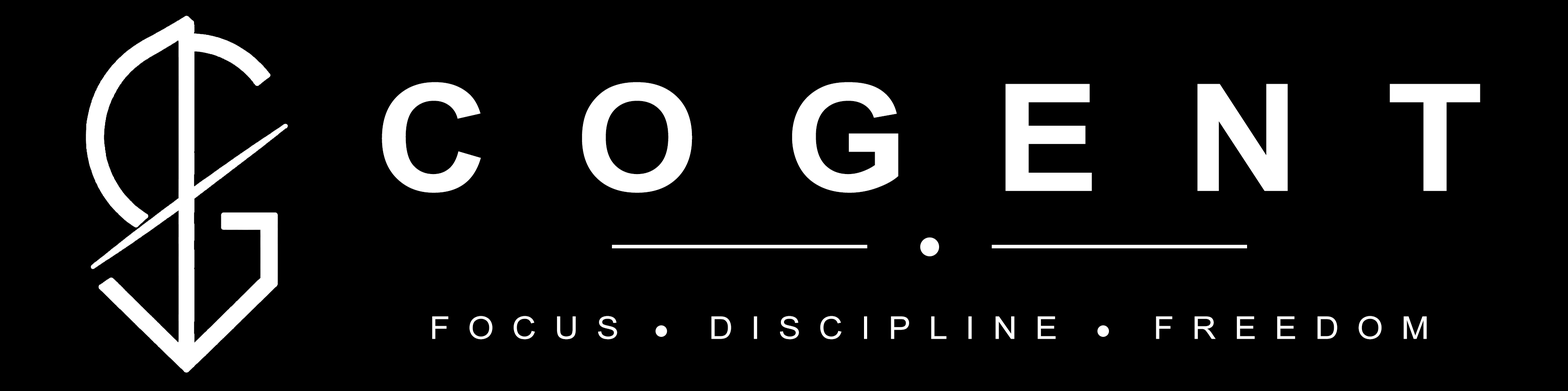
<style>
.page{position:relative;width:1568px;height:391px;background:#000000}
.page>*{position:absolute;margin:0}
.t1{font:149.1px "Arial-BoldMT";letter-spacing:0.545em;color:#ffffff;text-transform:uppercase;scale:1.06 1}
.t2{font:31.4px "ArialMT";letter-spacing:0.545em;color:#ffffff;text-transform:uppercase;scale:1.06 1}
</style>
<div class="page">
<p class="t1" style="left:382px;top:82px;width:1098px;height:111px">cogent</p>
<p class="t2" style="left:432px;top:316px;width:995px;height:23px">focus        discipline        freedom</p>
</div>
